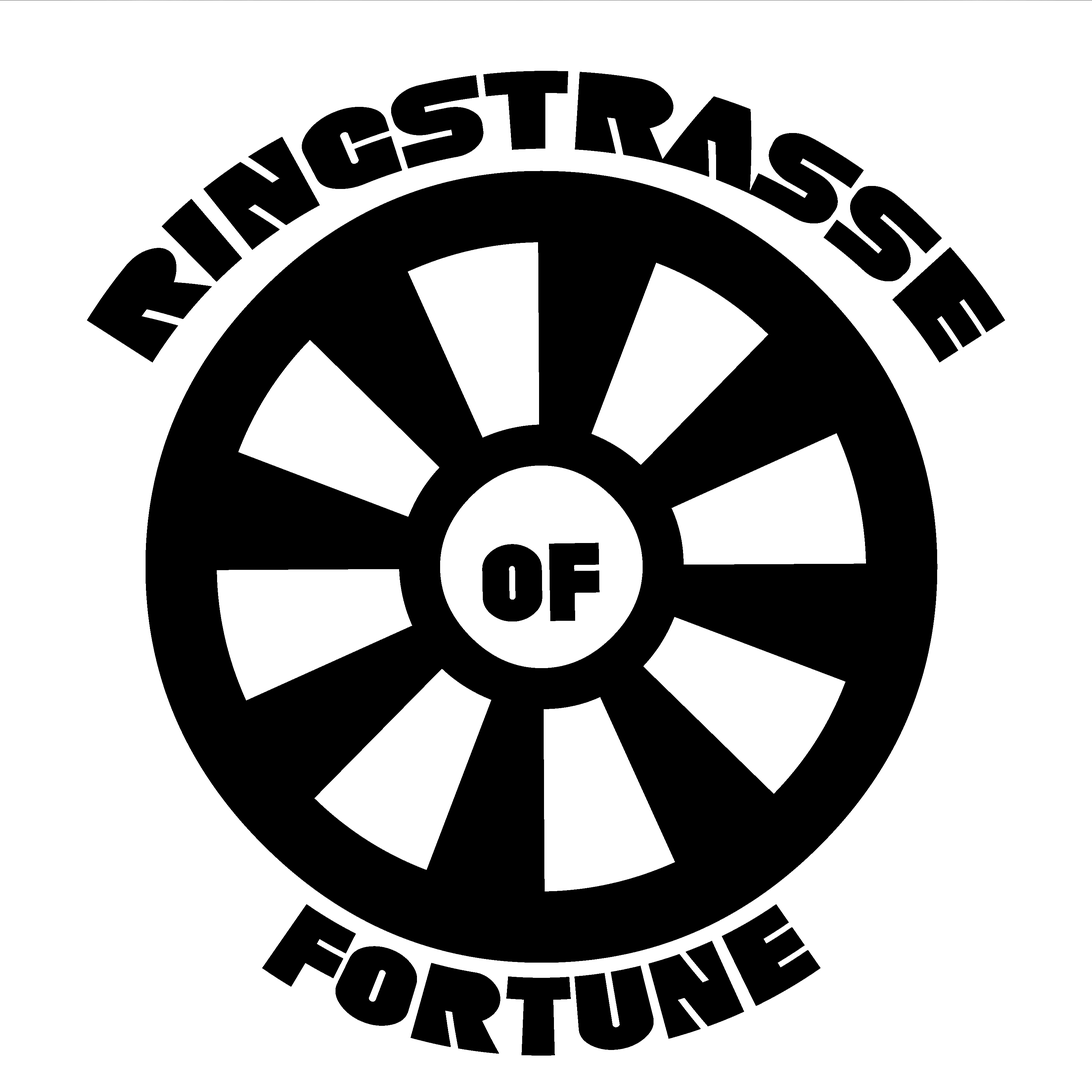
<style>
.page{position:relative;width:1092px;height:1092px;background:#ffffff}
.page>*{position:absolute;margin:0}
.t1{font:99.3px "SFFortuneWheel";color:#000000}
.t2{font:1014.8px "SFFortuneWheel";color:#000000}
</style>
<div class="page">
<p class="t1" style="left:87px;top:70px;width:918px;height:292px;text-align:center">ringstrasse</p>
<p class="t2" style="left:146px;top:170px;width:791px;height:792px">O</p>
<p class="t1" style="left:482px;top:542px;width:118px;height:79px;rotate:-1deg">of</p>
<p class="t1" style="left:262px;top:904px;width:559px;height:151px">Fortune</p>
</div>
